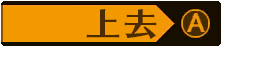
<style>
.page{position:relative;width:256px;height:64px;background:#ffffff}
.page>*{position:absolute;margin:0}
.t1{font:32px "SkipStd-B";letter-spacing:0.08em;color:#4c2b02;scale:1.1 1}
</style>
<div class="page">
<p class="t1" style="left:86px;top:9px;width:71px;height:30px">上去</p>
</div>
